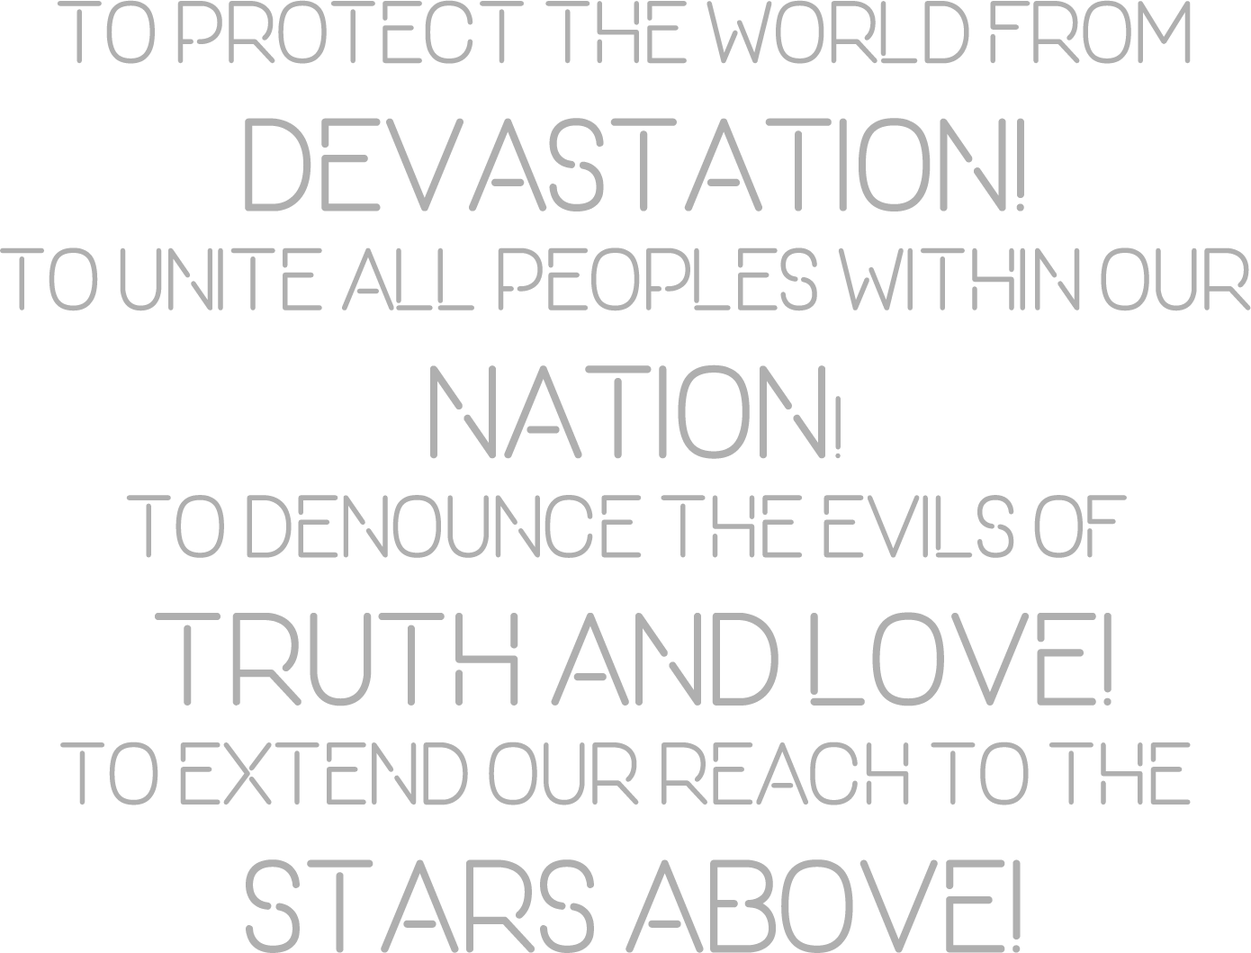
<style>
.page{position:relative;width:1251px;height:953px;background:#ffffff}
.page>*{position:absolute;margin:0}
.t1{font:82.7px "ONEDAY";color:#afafaf}
.t2{font:123.3px "ONEDAY";color:#afafaf}
</style>
<div class="page">
<p class="t1" style="left:0px;top:0px;width:1251px;height:953px;text-align:center">To protect the world from <br><span class="t2">devastation!<br></span>To unite all peoples within our <br><span class="t2">nation</span>!<br>To denounce the evils of <br><span class="t2">truth and love!<br></span>To extend our reach to the <br><span class="t2">stars above!</span></p>
</div>
